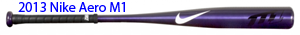
<style>
.page{position:relative;width:300px;height:35px;background:#ffffff}
.page>*{position:absolute;margin:0}
.t1{font:14px "MyriadPro-Regular";color:#0000ff}
</style>
<div class="page">
<p class="t1" style="left:18px;top:2px;width:107px;height:10px">2013 Nike Aero M1</p>
</div>
